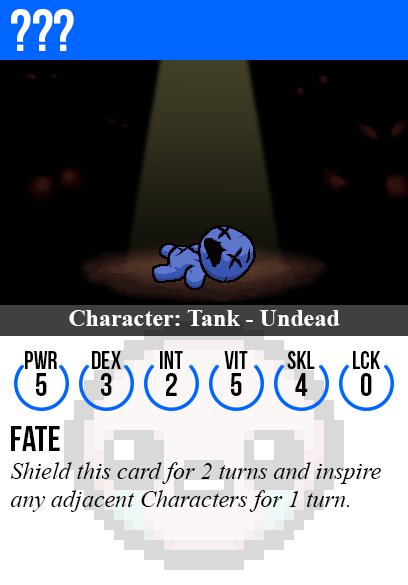
<style>
.page{position:relative;width:408px;height:585px;background:#000000}
.page>*{position:absolute;margin:0}
.t1{font:60px "BebasNeue";color:#ffffff}
.t2{font:24px "TimesNewRomanPS-BoldMT";color:#ffffff}
.t3{font:25px "BebasNeue";color:#000000}
.t4{font:32px "BebasNeue";color:#000000}
.t5{font:36px "BebasNeue";color:#000000}
.t6{font:24px "TimesNewRomanPS-ItalicMT";color:#000000}
</style>
<div class="page">
<p class="t1" style="left:11px;top:9px;width:63px;height:42px">???</p>
<p class="t2" style="left:69px;top:310px;width:271px;height:16px">Character: Tank - Undead</p>
<p class="t3" style="left:25px;top:351px;width:32px;height:18px">PWR</p>
<p class="t3" style="left:92px;top:351px;width:29px;height:18px">dex</p>
<p class="t3" style="left:160px;top:351px;width:23px;height:18px">int</p>
<p class="t3" style="left:224px;top:351px;width:24px;height:18px">vit</p>
<p class="t3" style="left:287px;top:351px;width:28px;height:18px">skl</p>
<p class="t3" style="left:353px;top:351px;width:27px;height:18px">lck</p>
<p class="t4" style="left:36px;top:373px;width:11px;height:23px">5</p>
<p class="t4" style="left:101px;top:373px;width:11px;height:23px">3</p>
<p class="t4" style="left:166px;top:373px;width:11px;height:23px">2</p>
<p class="t4" style="left:231px;top:373px;width:11px;height:23px">5</p>
<p class="t4" style="left:295px;top:373px;width:13px;height:23px">4</p>
<p class="t4" style="left:361px;top:373px;width:11px;height:23px">0</p>
<p class="t5" style="left:11px;top:426px;width:49px;height:25px">fate</p>
<p class="t6" style="left:10px;top:462px;width:371px;height:50px">Shield this card for 2 turns and inspire<br>any adjacent Characters for 1 turn.</p>
</div>
